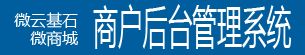
<style>
.page{position:relative;width:305px;height:55px;background:#005e9e}
.page>*{position:absolute;margin:0}
.t1{font:45.5px "MicrosoftYaHei";color:#ffffff;scale:0.54 1}
.t2{font:15.9px "MicrosoftYaHei";color:#ffffff}
</style>
<div class="page">
<p class="t1" style="left:93px;top:4px;width:198px;height:45px">商户后台管理系统</p>
<p class="t2" style="left:14px;top:12px;width:64px;height:16px">微云基石</p>
<p class="t2" style="left:30px;top:30px;width:48px;height:17px">微商城</p>
</div>
